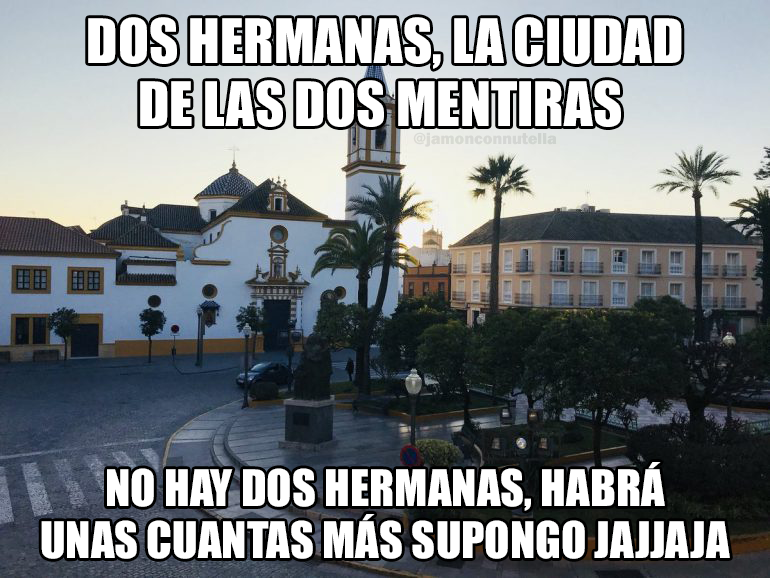
<style>
.page{position:relative;width:770px;height:578px}
.page>*{position:absolute;margin:0}
.t1{font:56.7px "Impact";color:#ffffff}
.t2{font:16.5px "FranklinGothic-Heavy";color:#d6d7d3}
.t3{font:46.6px "Impact";color:#ffffff}
</style>
<div class="page">
<p class="t1" style="left:88px;top:17px;width:594px;height:110px;text-align:center">DOS HERMANAS, LA CIUDAD<br>DE LAS DOS MENTIRAS</p>
<p class="t2" style="left:413px;top:132px;width:144px;height:15px">@jamonconnutella</p>
<p class="t3" style="left:41px;top:462px;width:689px;height:97px;text-align:center">NO HAY DOS HERMANAS, HABRÁ<br>UNAS CUANTAS MÁS SUPONGO JAJJAJA</p>
</div>
